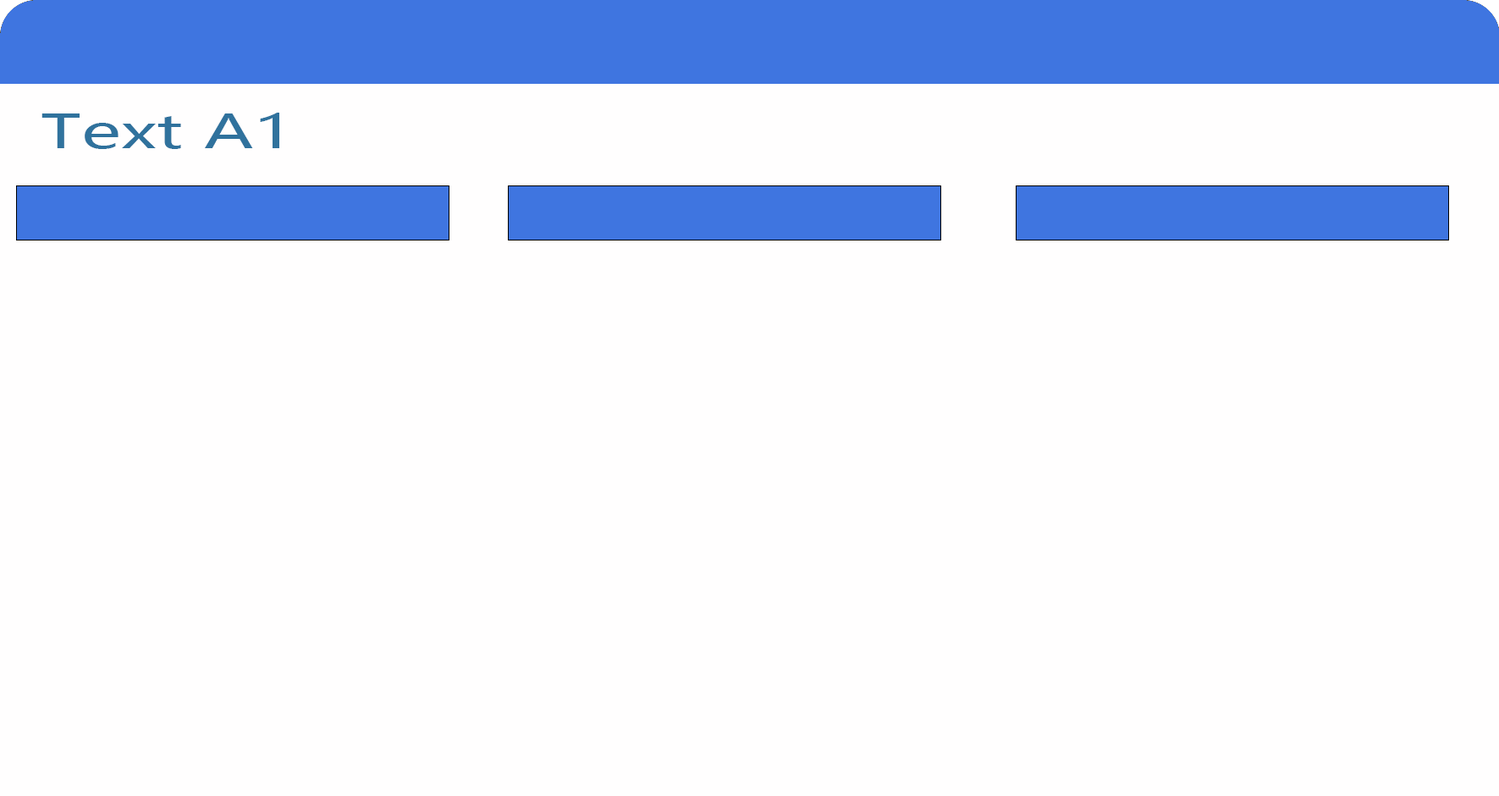
<style>
.page{position:relative;width:1499px;height:796px;background:#fffefe}
.page>*{position:absolute;margin:0}
.t1{font:45.6px "MicrosoftYaHei";color:#30729d;scale:1.54 1}
</style>
<div class="page">
<p class="t1" style="left:41px;top:113px;width:238px;height:36px">Text A1</p>
</div>
